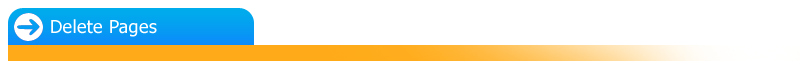
<style>
.page{position:relative;width:800px;height:61px;background:#ffffff}
.page>*{position:absolute;margin:0}
.t1{font:18px "Tahoma";letter-spacing:0.02em;color:#ffffff}
</style>
<div class="page">
<p class="t1" style="left:51px;top:19px;width:106px;height:18px">Delete Pages</p>
</div>
